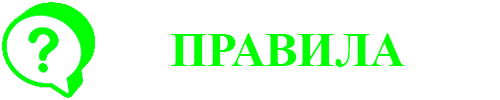
<style>
.page{position:relative;width:500px;height:100px;background:#ffffff}
.page>*{position:absolute;margin:0}
.t1{font:48px "TimesNewRomanPS-BoldMT";color:#00ff00}
</style>
<div class="page">
<p class="t1" style="left:170px;top:33px;width:235px;height:34px">ПРАВИЛА</p>
</div>
